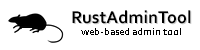
<style>
.page{position:relative;width:200px;height:50px;background:#ffffff}
.page>*{position:absolute;margin:0}
.t1{font:18px "Corbel-Bold";color:#000000}
.t2{font:11px "Corbel";color:#000000}
</style>
<div class="page">
<p class="t1" style="left:72px;top:10px;width:119px;height:14px">RustAdminTool</p>
<p class="t2" style="left:81px;top:28px;width:100px;height:7px">web-based admin tool</p>
</div>
